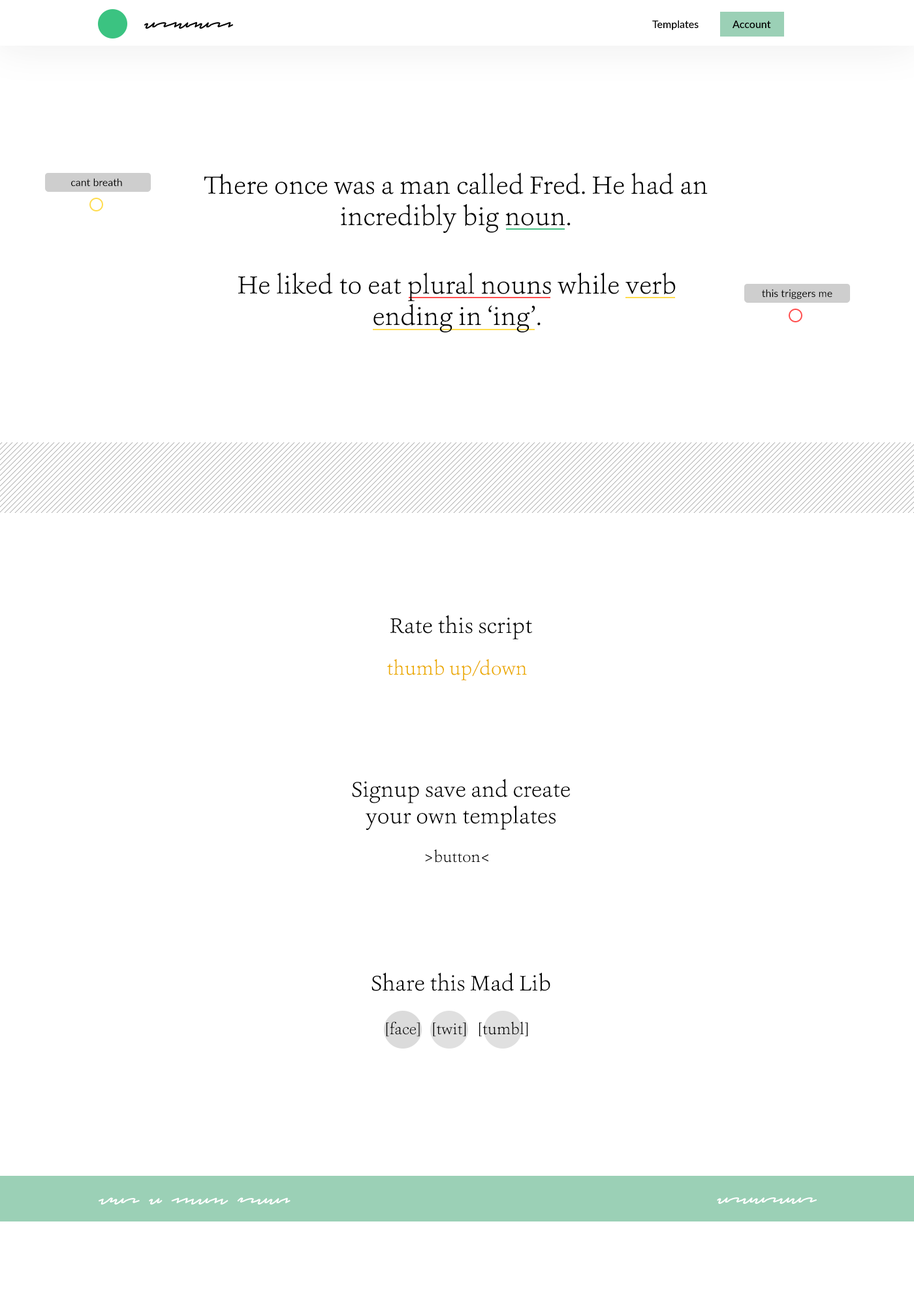
<style>
.page{position:relative;width:914px;height:1305px;background:#ffffff}
.page>*{position:absolute;margin:0}
.t1{font:26.1px "Ashbury-Light";color:#000000}
.t2{font:10.4px "Lato-Regular";color:#000000}
.t3{font:22.2px "Ashbury-Light";color:#000000}
.t4{font:19.6px "Ashbury-Light";color:#ecac00}
.t5{font:15.7px "Ashbury-Light";color:#000000}
</style>
<div class="page">
<p class="t1" style="left:204px;top:172px;width:503px;height:61px;text-align:center">There once was a man called Fred. He had an<br>incredibly big noun.</p>
<p class="t2" style="left:71px;top:178px;width:51px;height:9px">cant breath</p>
<p class="t1" style="left:238px;top:272px;width:437px;height:61px;text-align:center">He liked to eat plural nouns while verb<br>ending in ‘ing’.</p>
<p class="t2" style="left:762px;top:289px;width:70px;height:11px">this triggers me</p>
<p class="t3" style="left:390px;top:615px;width:142px;height:25px">Rate this script</p>
<p class="t4" style="left:387px;top:659px;width:140px;height:22px">thumb up/down</p>
<p class="t3" style="left:352px;top:779px;width:218px;height:51px;text-align:center">Signup save and create<br>your own templates</p>
<p class="t5" style="left:425px;top:849px;width:63px;height:14px">&gt;button&lt;</p>
<p class="t3" style="left:371px;top:972px;width:179px;height:19px">Share this Mad Lib</p>
<p class="t5" style="left:386px;top:1021px;width:142px;height:16px">[face]   [twit]   [tumbl]</p>
</div>
